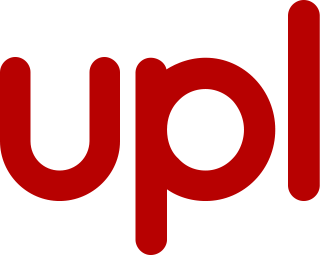
<style>
.page{position:relative;width:320px;height:255px;background:#ffffff}
.page>*{position:absolute;margin:0}
.t1{font:287.1px "Quicksand-Bold";color:#b70101}
</style>
<div class="page">
<p class="t1" style="left:288px;top:0px;width:32px;height:201px">l</p>
<p class="t1" style="left:0px;top:57px;width:120px;height:145px">u</p>
<p class="t1" style="left:135px;top:57px;width:141px;height:198px">p</p>
</div>
